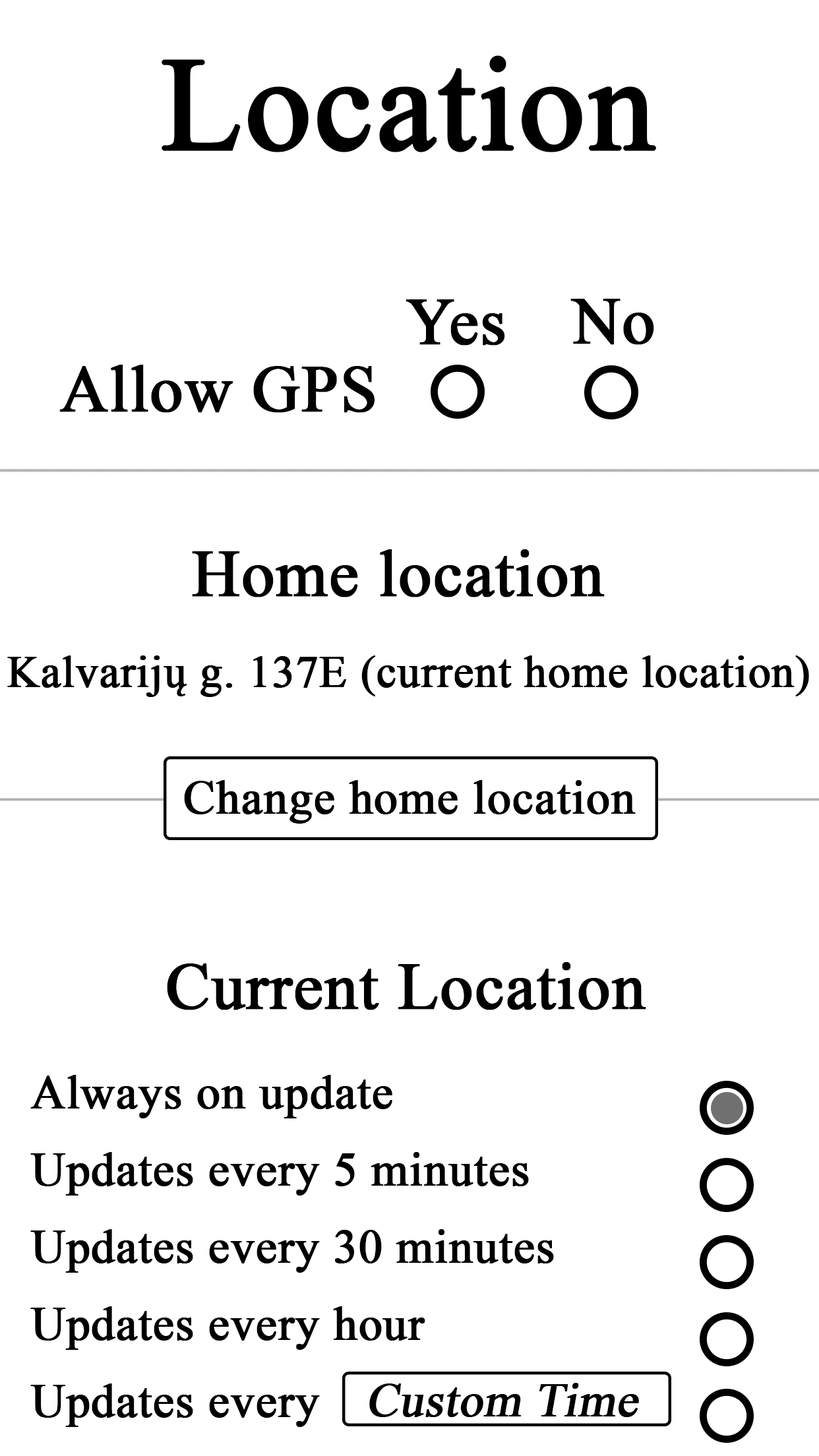
<style>
.page{position:relative;width:819px;height:1456px;background:#ffffff}
.page>*{position:absolute;margin:0}
.t1{font:131.9px "TimesNewRomanPSMT";color:#000000;font-weight:bold}
.t2{font:65.9px "TimesNewRomanPSMT";color:#000000;font-weight:bold}
.t3{font:44.8px "TimesNewRomanPSMT";color:#000000;font-weight:bold}
.t4{font:47.5px "TimesNewRomanPSMT";color:#000000;font-weight:bold}
.t5{font:47.5px/77.2px "TimesNewRomanPSMT";color:#000000;font-weight:bold}
.t6{font:47.5px "TimesNewRomanPSMT";color:#000000;font-weight:bold;font-style:italic}
</style>
<div class="page">
<p class="t1" style="left:162px;top:55px;width:494px;height:97px">Location</p>
<p class="t2" style="left:406px;top:299px;width:99px;height:47px">Yes</p>
<p class="t2" style="left:570px;top:299px;width:84px;height:46px">No</p>
<p class="t2" style="left:59px;top:365px;width:316px;height:48px">Allow GPS</p>
<p class="t2" style="left:192px;top:549px;width:413px;height:48px">Home location</p>
<p class="t3" style="left:7px;top:655px;width:802px;height:42px">Kalvarijų g. 137E (current home location)</p>
<p class="t4" style="left:184px;top:780px;width:452px;height:44px">Change home location</p>
<p class="t2" style="left:167px;top:962px;width:479px;height:48px">Current Location</p>
<p class="t5" style="left:30px;top:1075px;width:524px;height:352px">Always on update<br>Updates every 5 minutes<br>Updates every 30 minutes<br>Updates every hour<br>Updates every</p>
<p class="t6" style="left:369px;top:1383px;width:270px;height:34px">Custom Time</p>
</div>
